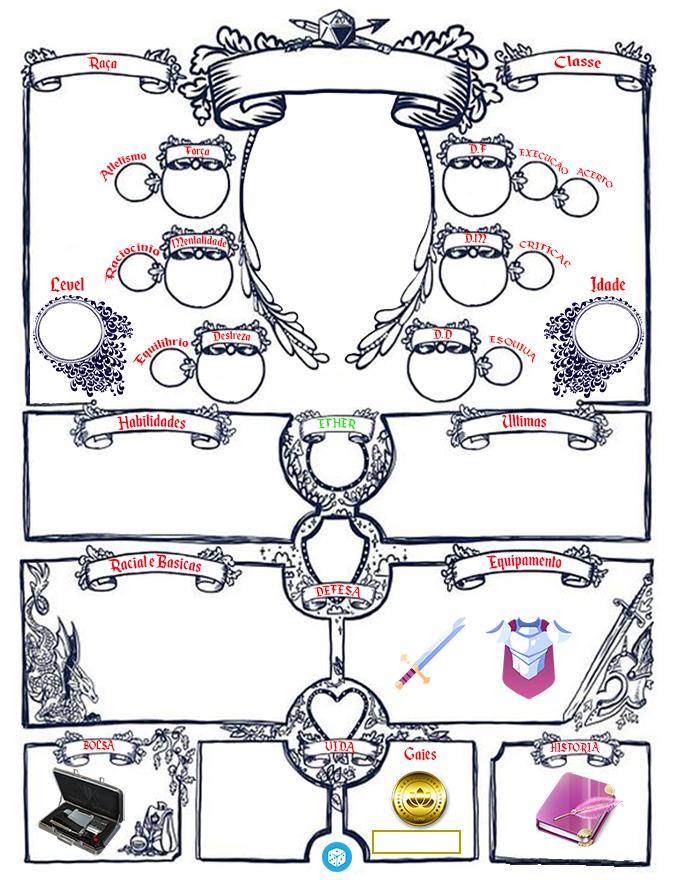
<style>
.page{position:relative;width:680px;height:880px;background:#ffffff}
.page>*{position:absolute;margin:0}
.t1{font:18.3px "EnchantedLand";color:#ff0000;scale:0.97 1}
.t2{font:14.7px "EnchantedLand";color:#f600ff;scale:0.97 1}
.t3{font:18.3px "EnchantedLand";color:#000119;scale:0.97 1}
.t4{font:14.7px "EnchantedLand";color:#ff0000;scale:0.97 1}
.t5{font:14.7px "EnchantedLand";color:#ff000c;scale:0.97 1}
.t6{font:9px "EnchantedLand";color:#ff0811}
.t7{font:14.4px "EnchantedLand";color:#ff000c}
.t8{font:9px "EnchantedLand";color:#ff000c}
.t9{font:14.5px "EnchantedLand";color:#ff0012}
.t10{font:14.7px "EnchantedLand";color:#ff0012;scale:0.97 1}
.t11{font:10.8px "EnchantedLand";color:#ff0000}
.t12{font:23.3px "EnchantedLand";color:#ff0000}
.t13{font:14.6px "EnchantedLand";color:#ff0006}
.t14{font:20.1px "EnchantedLand";color:#ff0012;scale:0.97 1}
.t15{font:20.1px "EnchantedLand";color:#ff000c;scale:0.97 1}
.t16{font:14.7px "EnchantedLand";color:#1ce307;scale:0.97 1}
.t17{font:20.1px "EnchantedLand";color:#ff0018;scale:0.97 1}
.t18{font:16.5px "EnchantedLand";color:#d800ff;scale:0.97 1}
.t19{font:12.7px "EnchantedLand";color:#ff0000;scale:0.97 1}
.t20{font:21.1px "EnchantedLand";color:#ff0000;scale:0.97 1}
.t21{font:12.7px "EnchantedLand";color:#ff001e;scale:0.97 1}
</style>
<div class="page">
<p class="t1" style="left:86px;top:56px;width:31px;height:15px"><span class="t2">            </span>Raça</p>
<p class="t1" style="left:554px;top:55px;width:48px;height:14px"><span class="t3">               </span>Classe</p>
<p class="t4" style="left:183px;top:145px;width:27px;height:12px">Força</p>
<p class="t5" style="left:467px;top:143px;width:20px;height:11px">D.F</p>
<p class="t6" style="left:518px;top:148px;width:51px;height:27px;rotate:24deg">EXECUÇÃO</p>
<p class="t7" style="left:99px;top:153px;width:48px;height:30px;rotate:-28deg">Atletismo</p>
<p class="t8" style="left:575px;top:168px;width:38px;height:20px;rotate:24deg">ACERTO</p>
<p class="t4" style="left:462px;top:232px;width:25px;height:12px">D.M</p>
<p class="t9" style="left:105px;top:243px;width:55px;height:41px;rotate:-30deg">Raciocinio</p>
<p class="t10" style="left:171px;top:235px;width:56px;height:14px">Mentalidade</p>
<p class="t11" style="left:519px;top:240px;width:52px;height:28px;rotate:24deg">CRITICAL</p>
<p class="t12" style="left:50px;top:277px;width:35px;height:15px">Level</p>
<p class="t12" style="left:590px;top:276px;width:36px;height:16px">Idade</p>
<p class="t4" style="left:431px;top:328px;width:21px;height:12px">D.D</p>
<p class="t13" style="left:131px;top:337px;width:58px;height:30px;rotate:-22deg">Equilibrio</p>
<p class="t4" style="left:210px;top:330px;width:41px;height:12px">Destreza</p>
<p class="t11" style="left:487px;top:335px;width:49px;height:28px;rotate:24deg">ESQUIVA</p>
<p class="t14" style="left:117px;top:413px;width:69px;height:18px">Habilidades</p>
<p class="t15" style="left:502px;top:413px;width:45px;height:16px">Ultimas</p>
<p class="t16" style="left:316px;top:417px;width:40px;height:13px">ETHER</p>
<p class="t17" style="left:107px;top:553px;width:95px;height:20px">Racial e Basicas</p>
<p class="t17" style="left:485px;top:554px;width:77px;height:17px">Equipamento</p>
<p class="t4" style="left:313px;top:583px;width:49px;height:16px"><span class="t18">       </span>DEFESA</p>
<p class="t19" style="left:82px;top:740px;width:34px;height:11px">BOLSA</p>
<p class="t4" style="left:324px;top:740px;width:32px;height:14px">VIDA</p>
<p class="t20" style="left:404px;top:747px;width:33px;height:14px">Gaies</p>
<p class="t21" style="left:550px;top:742px;width:50px;height:11px">HISTORIA</p>
</div>
